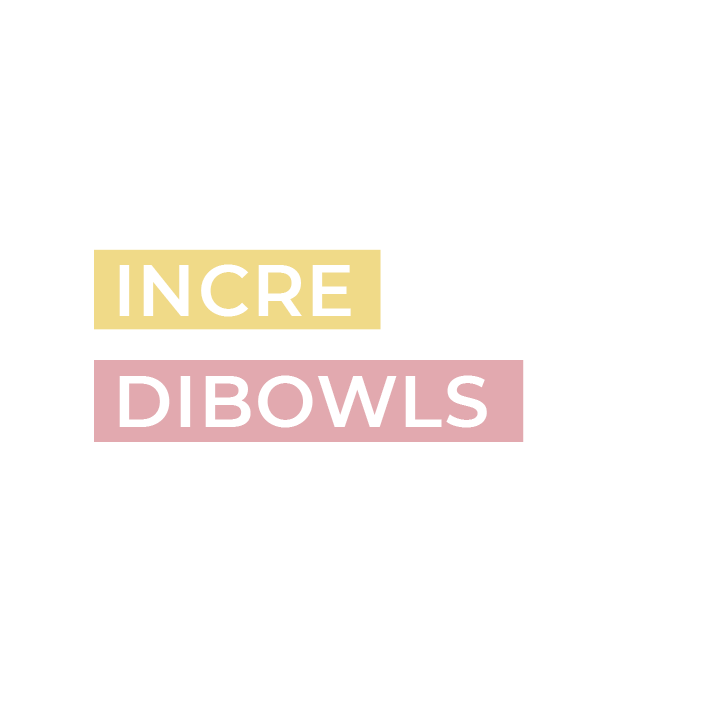
<style>
.page{position:relative;width:720px;height:720px;background:#ffffff}
.page>*{position:absolute;margin:0}
.t1{font:72px "Montserrat-SemiBold";letter-spacing:0.025em;color:#ffffff}
</style>
<div class="page">
<p class="t1" style="left:119px;top:264px;width:232px;height:53px">INCRE</p>
<p class="t1" style="left:119px;top:375px;width:368px;height:53px">DIBOWLS</p>
</div>
